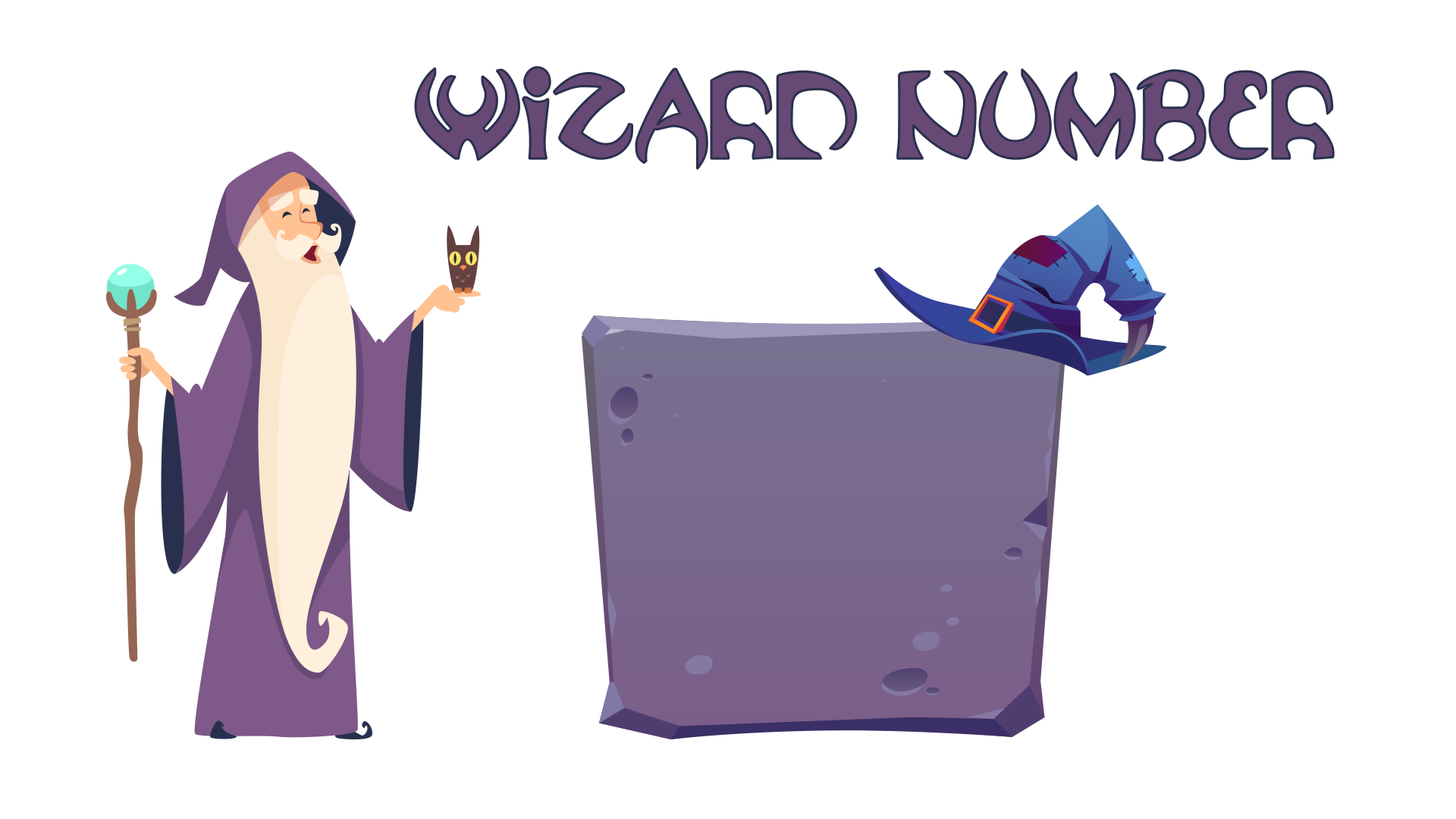
<style>
.page{position:relative;width:1456px;height:819px;background:#ffffff}
.page>*{position:absolute;margin:0}
.t1{font:136.5px "OublietteBold";color:#664975}
</style>
<div class="page">
<p class="t1" style="left:416px;top:67px;width:918px;height:102px">wizard number</p>
</div>
